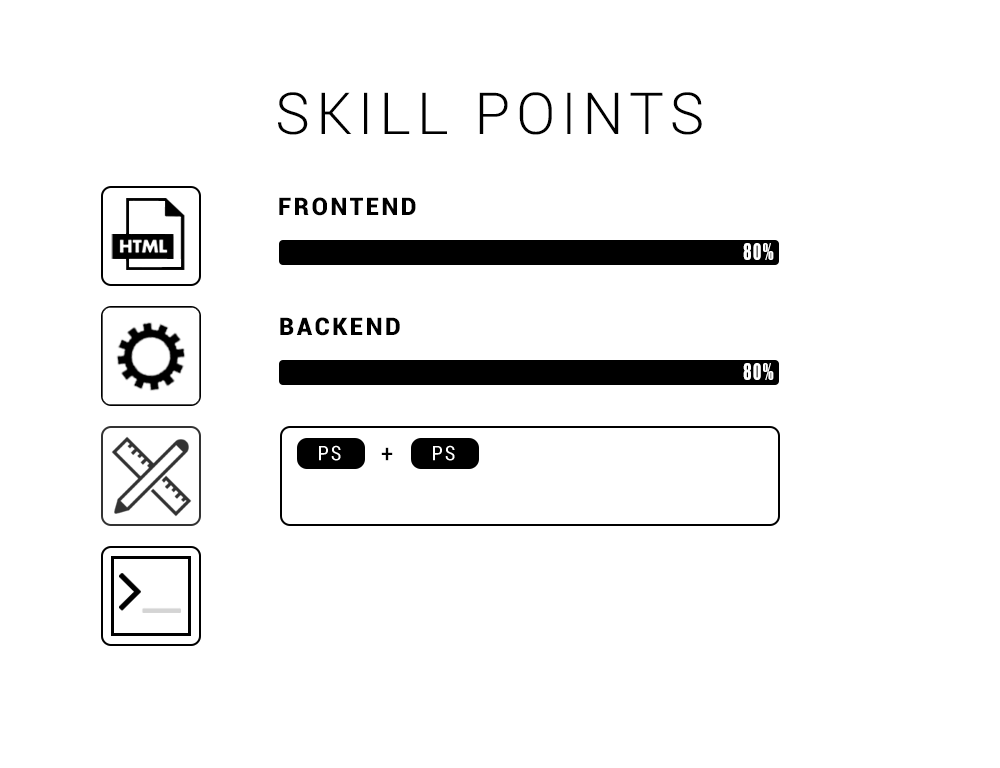
<style>
.page{position:relative;width:1000px;height:768px;background:#ffffff}
.page>*{position:absolute;margin:0}
.t1{font:58px "Roboto-Light";letter-spacing:0.1em;color:#000000}
.t2{font:24px "Roboto-Black";letter-spacing:0.1em;color:#000000}
.t3{font:20.7px "Impact";letter-spacing:0.1em;color:#ffffff;scale:0.74 1}
.t4{font:24px "Roboto-Condensed";letter-spacing:0.1em;color:#000000}
</style>
<div class="page">
<p class="t1" style="left:278px;top:92px;width:424px;height:43px">SKILL POINTS</p>
<p class="t2" style="left:279px;top:197px;width:137px;height:19px">FRONTEND</p>
<p class="t3" style="left:743px;top:243px;width:31px;height:17px">80%</p>
<p class="t2" style="left:280px;top:317px;width:120px;height:19px">BACKEND</p>
<p class="t3" style="left:743px;top:363px;width:31px;height:17px">80%</p>
<p class="t4" style="left:381px;top:447px;width:12px;height:14px">+</p>
</div>
